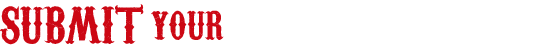
<style>
.page{position:relative;width:540px;height:45px;background:#ffffff}
.page>*{position:absolute;margin:0}
.t1{font:50px "CarnivaleeFreakshow";color:#cc0814;scale:0.93 1}
.t2{font:50px "CarnivaleeFreakshow";color:#ffffff;scale:0.93 1}
.t3{font:42px "CarnivaleeFreakshow";color:#ffffff;scale:0.93 1}
.t4{font:55px "CarnivaleeFreakshow";color:#ffffff;scale:0.93 1}
</style>
<div class="page">
<p class="t1" style="left:0px;top:0px;width:540px;height:45px">SUBMIT your <span class="t2">CLUB</span><span class="t3">HOUSE </span><span class="t4">STORY</span></p>
</div>
